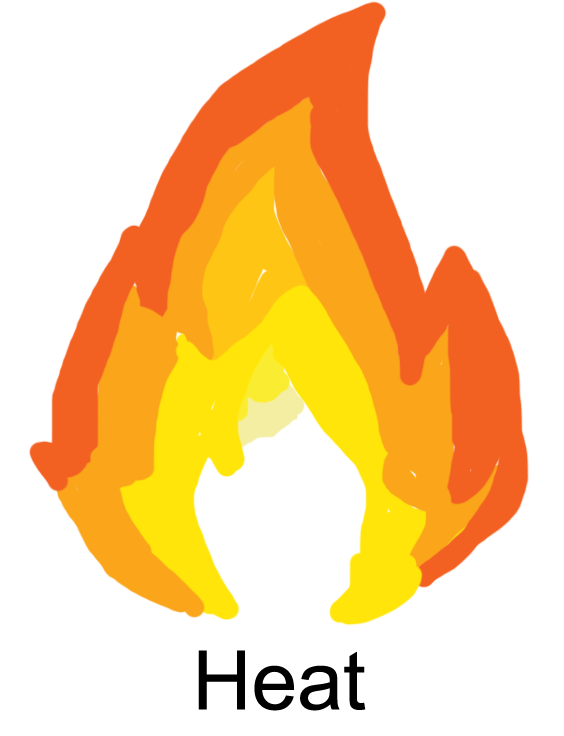
<style>
.page{position:relative;width:564px;height:736px;background:#ffffff}
.page>*{position:absolute;margin:0}
.t1{font:82.1px "ArialMT";color:#000000}
</style>
<div class="page">
<p class="t1" style="left:198px;top:650px;width:168px;height:61px">Heat</p>
</div>
